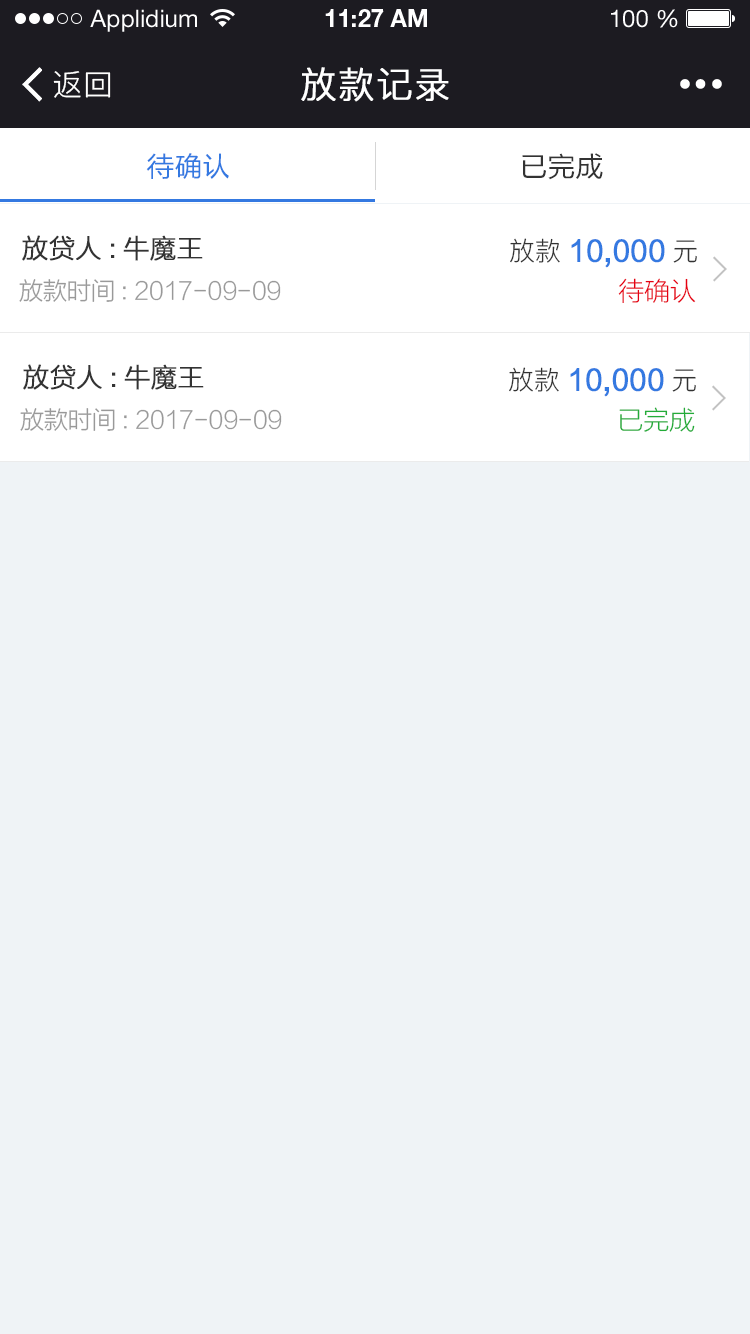
<style>
.page{position:relative;width:750px;height:1334px;background:#eff3f6}
.page>*{position:absolute;margin:0}
.t1{font:24px "HelveticaNeueLTStd-Roman";color:#ffffff}
.t2{font:24px "HelveticaNeueLTStd-Bd";color:#ffffff}
.t3{font:30px "PingFang-SC-Regular";letter-spacing:0.025em;color:#ffffff}
.t4{font:36px "PingFang-SC-Regular";letter-spacing:0.025em;color:#ffffff;font-weight:bold}
.t5{font:28px "FZLTH_YS_GBK";color:#3479e1}
.t6{font:28px "FZLTH_YS_GBK";color:#333333}
.t7{font:26px "FZLTXHK--GBK1-0";color:#333333;font-weight:bold}
.t8{font:28px "FZLTH_YS_GB18030";color:#3479e1;font-weight:bold}
.t9{font:26px "PingFang-SC-Regular";color:#333333}
.t10{font:24px "FZLTXHK--GBK1-0";color:#999999}
.t11{font:26px "FZLTXHK--GBK1-0";color:#e60012}
.t12{font:26px "FZLTXHK--GBK1-0";color:#22ac38}
</style>
<div class="page">
<p class="t1" style="left:90px;top:9px;width:107px;height:23px">Applidium</p>
<p class="t2" style="left:325px;top:9px;width:102px;height:18px">11:27 AM</p>
<p class="t1" style="left:611px;top:9px;width:67px;height:19px">100 %</p>
<p class="t3" style="left:53px;top:71px;width:58px;height:27px">返回</p>
<p class="t4" style="left:301px;top:67px;width:148px;height:35px">放款记录</p>
<p class="t5" style="left:146px;top:153px;width:83px;height:26px">待确认</p>
<p class="t6" style="left:522px;top:153px;width:81px;height:27px">已完成</p>
<p class="t7" style="left:22px;top:235px;width:181px;height:26px">放贷人:牛魔王</p>
<p class="t8" style="left:510px;top:238px;width:187px;height:30px"><span class="t9">放款</span>10,000<span class="t9">元</span></p>
<p class="t10" style="left:19px;top:279px;width:262px;height:23px">放款时间: 2017-09-09</p>
<p class="t11" style="left:618px;top:278px;width:78px;height:25px">待确认</p>
<p class="t7" style="left:23px;top:364px;width:181px;height:26px">放贷人:牛魔王</p>
<p class="t8" style="left:509px;top:367px;width:187px;height:30px"><span class="t9">放款</span>10,000<span class="t9">元</span></p>
<p class="t10" style="left:20px;top:408px;width:262px;height:23px">放款时间: 2017-09-09</p>
<p class="t12" style="left:619px;top:407px;width:76px;height:25px">已完成</p>
</div>
